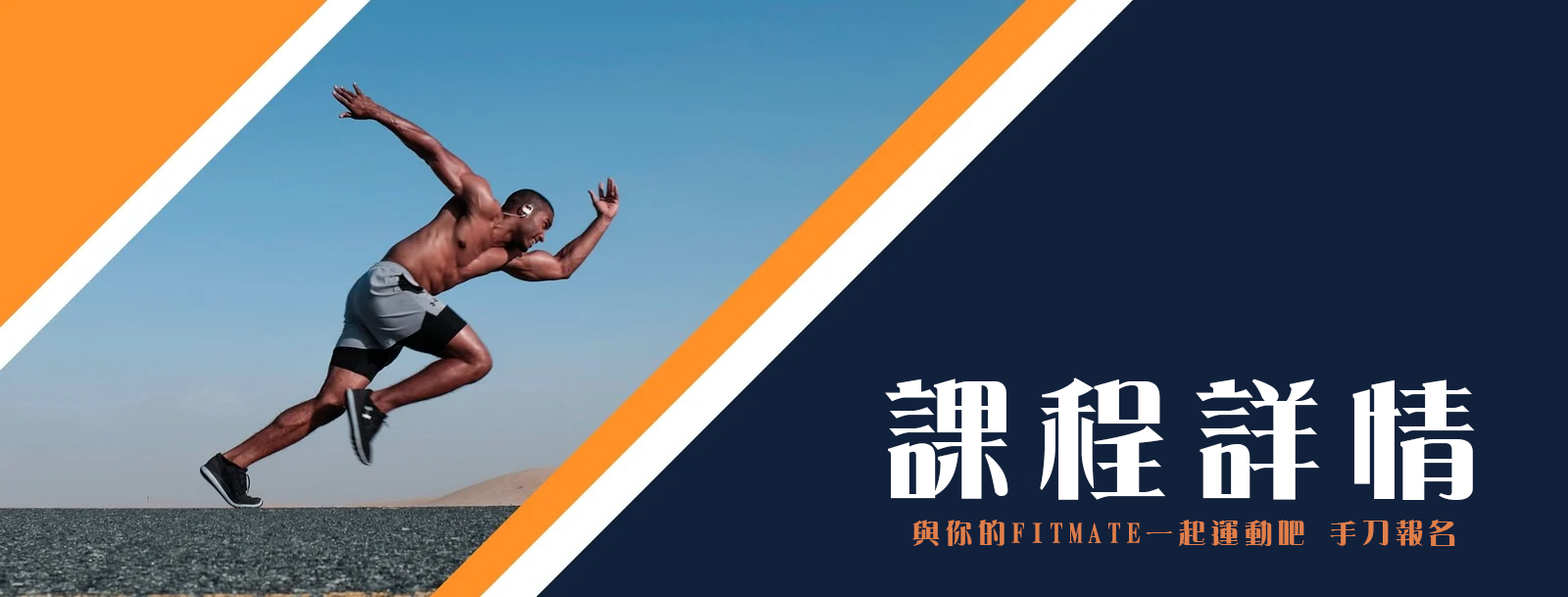
<style>
.page{position:relative;width:1568px;height:597px;background:#11213c}
.page>*{position:absolute;margin:0}
.t1{font:129.4px "DFYeaSong-W9-WIN-BF";letter-spacing:0.2em;color:#ffffff}
.t2{font:27.4px "DFYeaSong-W9-WIN-BF";letter-spacing:0.2em;color:#e07f4a}
</style>
<div class="page">
<p class="t1" style="left:885px;top:377px;width:590px;height:123px">課程詳情</p>
<p class="t2" style="left:912px;top:519px;width:543px;height:27px">與你的FITMATE一起運動吧 手刀報名</p>
</div>
